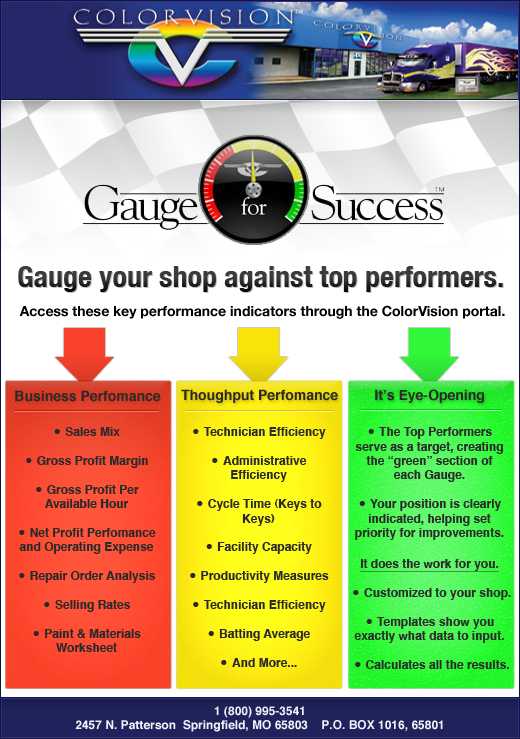
<style>
.page{position:relative;width:520px;height:739px}
.page>*{position:absolute;margin:0}
.t1{font:30px "HelveticaNeue-CondensedBold";color:#373737}
.t2{font:14px "HelveticaNeue-Bold";color:#000000}
.t3{font:14px "Helvetica-Bold";color:#2a2a2a}
.t4{font:12px "Helvetica-Bold";color:#2a2a2a}
.t5{font:24px "Helvetica-Bold";color:#2a2a2a}
.t6{font:12px "Helvetica-Bold";color:#2a2a2a;text-decoration:underline}
.t7{font:12px "Helvetica-Bold";color:#f2f2fa}
</style>
<div class="page">
<p class="t1" style="left:18px;top:266px;width:485px;height:26px">Gauge your shop against top performers.</p>
<p class="t2" style="left:19px;top:305px;width:486px;height:14px">Access these key performance indicators through the ColorVision portal.</p>
<p class="t3" style="left:15px;top:390px;width:146px;height:12px">Business Perfomance</p>
<p class="t3" style="left:181px;top:389px;width:157px;height:14px">Thoughput Perfomance</p>
<p class="t3" style="left:375px;top:389px;width:109px;height:14px">It’s Eye-Opening</p>
<p class="t4" style="left:19px;top:427px;width:137px;height:225px;text-align:center"><span class="t5">• </span>Sales Mix<br><span class="t5">• </span>Gross Profit Margin<br><span class="t5">• </span>Gross Profit Per <br>Available Hour<br><span class="t5">• </span>Net Profit Perfomance and Operating Expense<br><span class="t5">• </span>Repair Order Analysis<br><span class="t5">• </span>Selling Rates<br><span class="t5">• </span>Paint &amp; Materials <br>Worksheet</p>
<p class="t4" style="left:190px;top:427px;width:139px;height:240px;text-align:center"><span class="t5">• </span>Technician Efficiency<br><span class="t5">• </span>Administrative <br>Efficiency<br><span class="t5">• </span>Cycle Time (Keys to Keys)<br><span class="t5">• </span>Facility Capacity<br><span class="t5">• </span>Productivity Measures<br><span class="t5">• </span>Technician Efficiency<br><span class="t5">• </span>Batting Average<br><span class="t5">• </span>And More...</p>
<p class="t4" style="left:354px;top:427px;width:150px;height:216px;text-align:center"><span class="t5">• </span>The Top Performers serve as a target, creating the “green” section of each Gauge.<br><span class="t5">• </span>Your position is clearly indicated, helping set priority for improvements.<br> <br><span class="t6">It does the work for you.<br><br></span><span class="t5">• </span>Templates show you exactly what data to input.</p>
<p class="t4" style="left:353px;top:588px;width:158px;height:81px;text-align:center"><span class="t5">• </span>Customized to your shop.<br><br><br><br><span class="t5">• </span>Calculates all the results.</p>
<p class="t7" style="left:75px;top:706px;width:368px;height:26px;text-align:center">1 (800) 995-3541<br>2457 N. Patterson  Springfield, MO 65803    P.O. BOX 1016, 65801</p>
</div>
